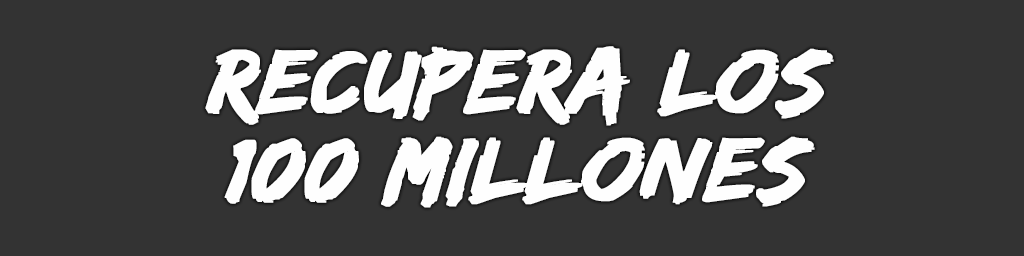
<style>
.page{position:relative;width:1024px;height:256px;background:#333333}
.page>*{position:absolute;margin:0}
.t1{font:94px/88px "EdoSZ";color:#fefefe;font-weight:bold;font-style:italic;scale:1.04 1}
</style>
<div class="page">
<p class="t1" style="left:205px;top:46px;width:629px;height:162px;text-align:center">Recupera los<br>100 millones</p>
</div>
